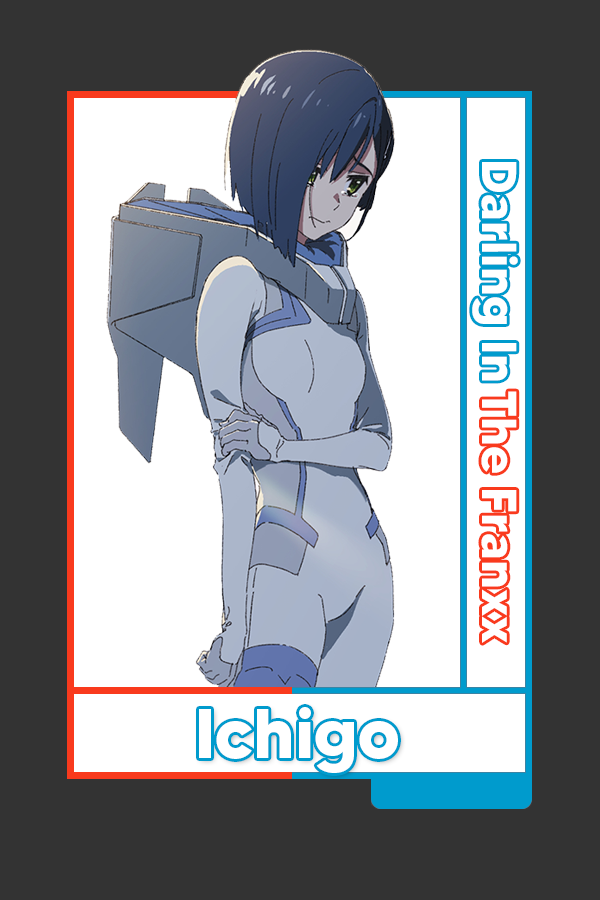
<style>
.page{position:relative;width:600px;height:900px;background:#333333}
.page>*{position:absolute;margin:0}
.t1{font:48.8px "MADETOMMY-Bold";color:#ffffff}
.t2{font:70.1px "MADETOMMY-Bold";color:#ffffff}
</style>
<div class="page">
<p class="t1" style="left:472px;top:162px;width:46px;height:219px;rotate:90deg">Darling In</p>
<p class="t1" style="left:481px;top:391px;width:36px;height:252px;rotate:90deg">The Franxx</p>
<p class="t2" style="left:199px;top:707px;width:199px;height:66px">Ichigo</p>
</div>
